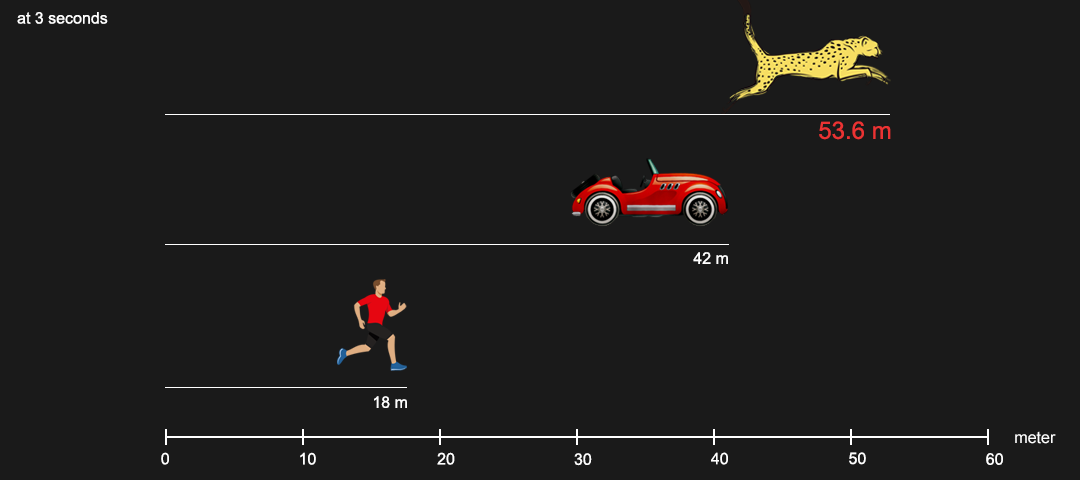
<style>
.page{position:relative;width:1080px;height:480px;background:#1a1a1a}
.page>*{position:absolute;margin:0}
.t1{font:16px "ArialMT";color:#ffffff}
.t2{font:24px "ArialMT";color:#eb3333}
</style>
<div class="page">
<p class="t1" style="left:17px;top:12px;width:91px;height:12px">at 3 seconds</p>
<p class="t2" style="left:819px;top:121px;width:72px;height:19px">53.6 m</p>
<p class="t1" style="left:693px;top:252px;width:35px;height:12px">42 m</p>
<p class="t1" style="left:374px;top:396px;width:33px;height:12px">18 m</p>
<p class="t1" style="left:1015px;top:431px;width:41px;height:13px">meter</p>
<p class="t1" style="left:161px;top:452px;width:8px;height:13px">0</p>
<p class="t1" style="left:300px;top:452px;width:16px;height:13px">10</p>
<p class="t1" style="left:437px;top:452px;width:18px;height:13px">20</p>
<p class="t1" style="left:574px;top:453px;width:18px;height:13px">30</p>
<p class="t1" style="left:711px;top:452px;width:17px;height:13px">40</p>
<p class="t1" style="left:849px;top:452px;width:17px;height:13px">50</p>
<p class="t1" style="left:986px;top:453px;width:17px;height:12px">60</p>
</div>
